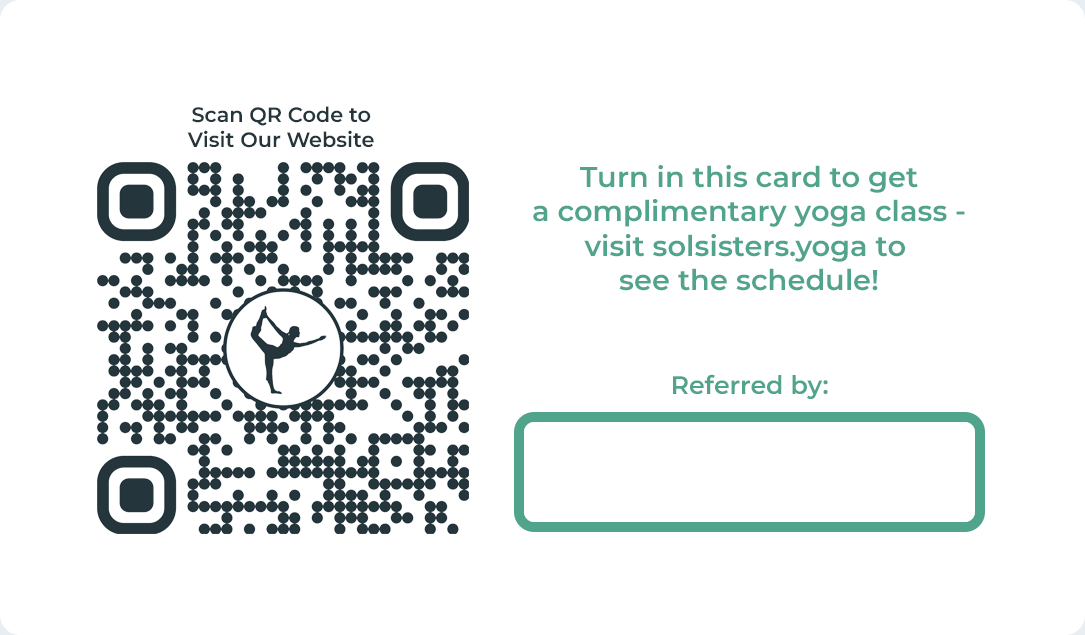
<style>
.page{position:relative;width:1085px;height:635px;background:#ffffff}
.page>*{position:absolute;margin:0}
.t1{font:20.8px "Montserrat-SemiBold";color:#24353c}
.t2{font:28.9px "Montserrat-SemiBold";color:#50a48c}
.t3{font:25.3px "Montserrat-SemiBold";color:#50a48c}
</style>
<div class="page">
<p class="t1" style="left:187px;top:106px;width:187px;height:42px;text-align:center">Scan QR Code to<br>Visit Our Website</p>
<p class="t2" style="left:533px;top:165px;width:432px;height:126px;text-align:center">Turn in this card to get<br>a complimentary yoga class -<br>visit solsisters.yoga to <br>see the schedule!</p>
<p class="t3" style="left:673px;top:374px;width:155px;height:26px">Referred by:</p>
</div>
